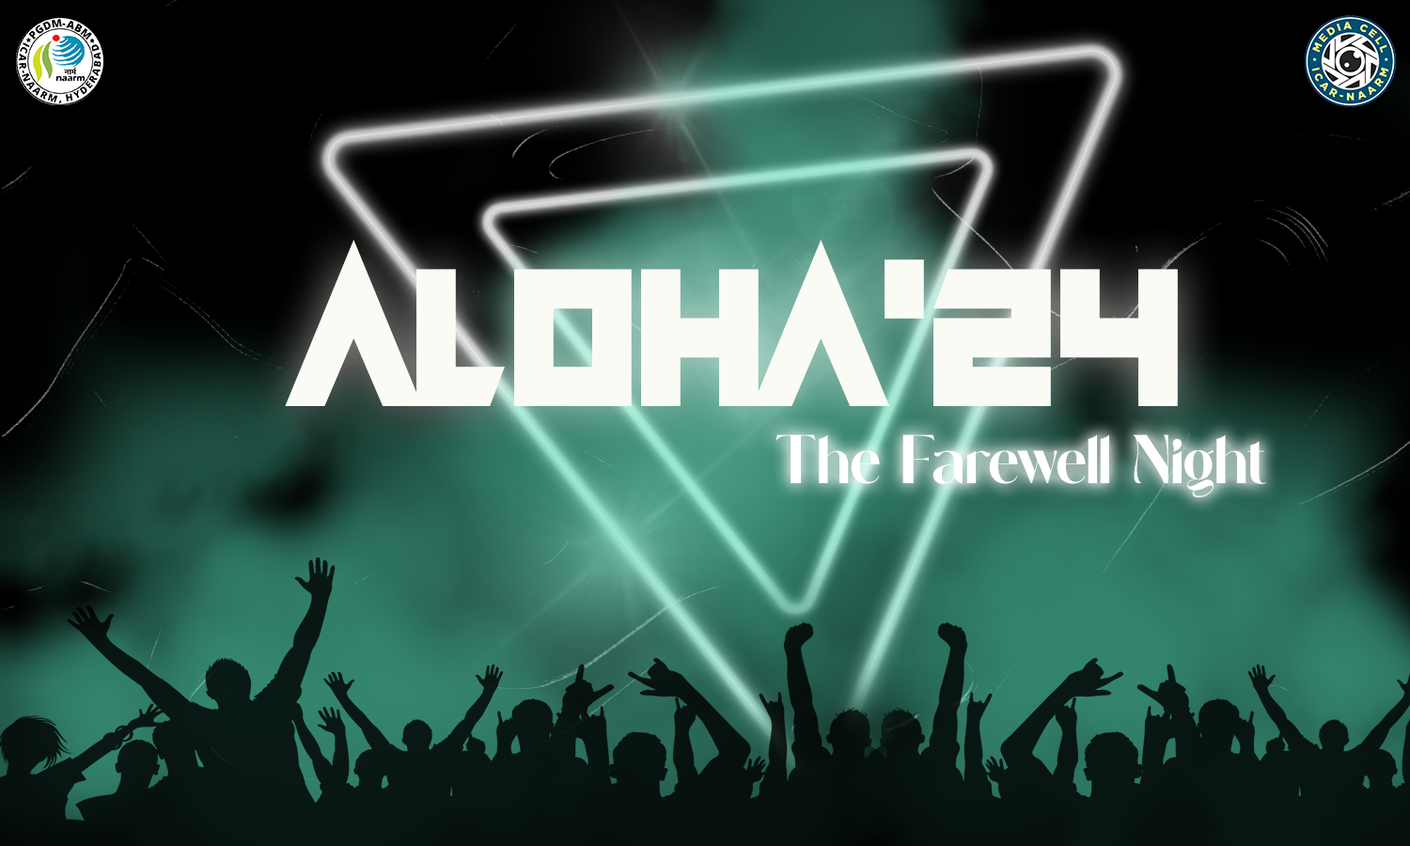
<style>
.page{position:relative;width:1410px;height:846px}
.page>*{position:absolute;margin:0}
.t1{font:199.6px "NeonRave";color:#fbfcf6}
.t2{font:68.8px "Enoway-PersonalUseOnly";color:#ffffff}
</style>
<div class="page">
<p class="t1" style="left:285px;top:240px;width:893px;height:166px">ALOHA'24</p>
<p class="t2" style="left:775px;top:434px;width:491px;height:63px">The Farewell Night</p>
</div>
